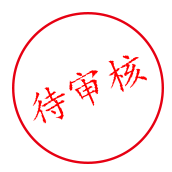
<style>
.page{position:relative;width:172px;height:172px;background:#ffffff}
.page>*{position:absolute;margin:0}
.t1{font:39.8px "¿¬Ìå";color:#ff0000;scale:1.05 1}
</style>
<div class="page">
<p class="t1" style="left:32px;top:55px;width:115px;height:69px;rotate:-24deg">待审核</p>
</div>
